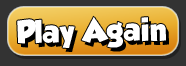
<style>
.page{position:relative;width:186px;height:66px;background:#333333}
.page>*{position:absolute;margin:0}
.t1{font:28.4px "GROBOLD";color:#ffffff}
</style>
<div class="page">
<p class="t1" style="left:17px;top:16px;width:149px;height:32px;rotate:-1deg">Play Again</p>
</div>
